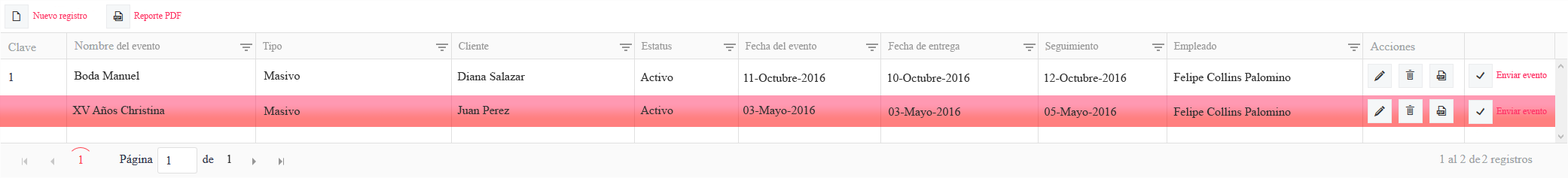
<style>
.page{position:relative;width:1568px;height:178px;background:#ffffff}
.page>*{position:absolute;margin:0}
.t1{font:9px "TimesNewRomanPSMT";color:#ff3366}
.t2{font:10.5px "TimesNewRomanPSMT";color:#999999}
.t3{font:12px "TimesNewRomanPSMT";color:#333333}
</style>
<div class="page">
<p class="t1" style="left:32px;top:12px;width:55px;height:9px">Nuevo registro</p>
<p class="t1" style="left:134px;top:12px;width:48px;height:9px">Reporte PDF</p>
<p class="t2" style="left:117px;top:42px;width:43px;height:8px">del evento</p>
<p class="t2" style="left:263px;top:42px;width:19px;height:10px">Tipo</p>
<p class="t2" style="left:459px;top:42px;width:30px;height:8px">Cliente</p>
<p class="t2" style="left:641px;top:42px;width:31px;height:8px">Estatus</p>
<p class="t2" style="left:745px;top:42px;width:72px;height:8px">Fecha del evento</p>
<p class="t2" style="left:888px;top:42px;width:72px;height:10px">Fecha de entrega</p>
<p class="t2" style="left:1045px;top:42px;width:54px;height:10px">Seguimiento</p>
<p class="t2" style="left:1173px;top:42px;width:44px;height:10px">Empleado</p>
<p class="t3" style="left:74px;top:72px;width:65px;height:8px">Boda Manuel</p>
<p class="t3" style="left:264px;top:72px;width:36px;height:8px">Masivo</p>
<p class="t3" style="left:457px;top:72px;width:68px;height:9px">Diana Salazar</p>
<p class="t3" style="left:640px;top:73px;width:33px;height:8px">Activo</p>
<p class="t3" style="left:744px;top:74px;width:81px;height:8px">11-Octubre-2016</p>
<p class="t3" style="left:888px;top:74px;width:82px;height:8px">10-Octubre-2016</p>
<p class="t3" style="left:1045px;top:74px;width:82px;height:8px">12-Octubre-2016</p>
<p class="t3" style="left:1173px;top:73px;width:118px;height:11px">Felipe Collins Palomino</p>
<p class="t3" style="left:72px;top:106px;width:93px;height:8px">XV Años Christina</p>
<p class="t3" style="left:264px;top:107px;width:36px;height:8px">Masivo</p>
<p class="t3" style="left:457px;top:106px;width:53px;height:8px">Juan Perez</p>
<p class="t3" style="left:640px;top:106px;width:33px;height:8px">Activo</p>
<p class="t3" style="left:743px;top:106px;width:72px;height:11px">03-Mayo-2016</p>
<p class="t3" style="left:889px;top:108px;width:71px;height:10px">03-Mayo-2016</p>
<p class="t3" style="left:1045px;top:108px;width:71px;height:10px">05-Mayo-2016</p>
<p class="t3" style="left:1173px;top:108px;width:118px;height:10px">Felipe Collins Palomino</p>
<p class="t3" style="left:227px;top:155px;width:4px;height:8px">1</p>
</div>
